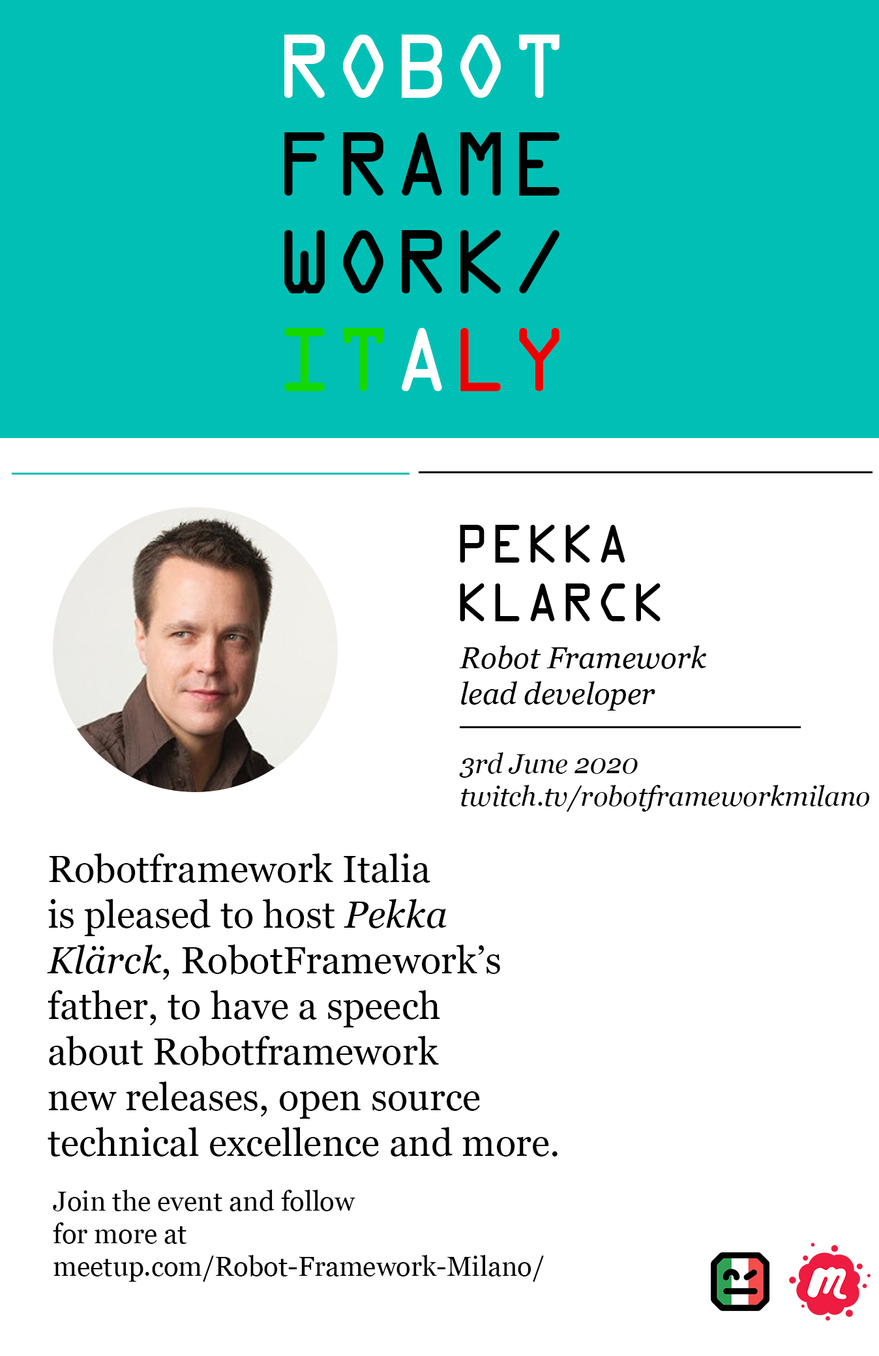
<style>
.page{position:relative;width:879px;height:1356px;background:#ffffff}
.page>*{position:absolute;margin:0}
.t1{font:81.5px "OCRAMedium";color:#000000}
.t2{font:81.5px "OCRAMedium";color:#ffffff}
.t3{font:81.5px "OCRAMedium";color:#14d800}
.t4{font:81.5px "OCRAMedium";color:#ec0000}
.t5{font:48.9px "OCRAMedium";color:#000000}
.t6{font:29.9px "Georgia-Italic";color:#000000}
.t7{font:27.2px "Georgia-Italic";color:#000000}
.t8{font:38px "Georgia";color:#000000}
.t9{font:38px "Georgia-Italic";color:#000000}
.t10{font:27.2px "Georgia";color:#000000}
</style>
<div class="page">
<p class="t1" style="left:284px;top:35px;width:276px;height:356px"><span class="t2">ROBOT<br></span>FRAME<br>WORK/<br><span class="t3">IT</span><span class="t2">A</span><span class="t4">LY</span></p>
<p class="t5" style="left:460px;top:524px;width:201px;height:97px">PEKKA<br>KLARCK</p>
<p class="t6" style="left:459px;top:646px;width:247px;height:65px">Robot Framework<br>lead developer</p>
<p class="t7" style="left:459px;top:753px;width:411px;height:59px">3rd June 2020 <br>twitch.tv/robotframeworkmilano</p>
<p class="t8" style="left:47px;top:854px;width:511px;height:303px">Robotframework Italia<br>is pleased to host <span class="t9">Pekka <br>Klärck</span>, RobotFramework’s <br>father, to have a speech <br>about Robotframework<br>new releases, open source<br>technical excellence and more.</p>
<p class="t10" style="left:53px;top:1190px;width:491px;height:92px">Join the event and follow <br>for more at <br>meetup.com/Robot-Framework-Milano/</p>
</div>
